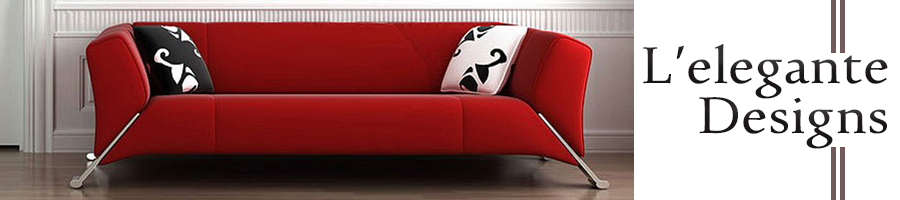
<style>
.page{position:relative;width:900px;height:200px;background:#ffffff}
.page>*{position:absolute;margin:0}
.t1{font:58.3px/25px "UrduTypesetting";color:#1c1819}
</style>
<div class="page">
<p class="t1" style="left:643px;top:44px;width:245px;height:105px;text-align:center">L’elegante <br><br>    Designs</p>
</div>
